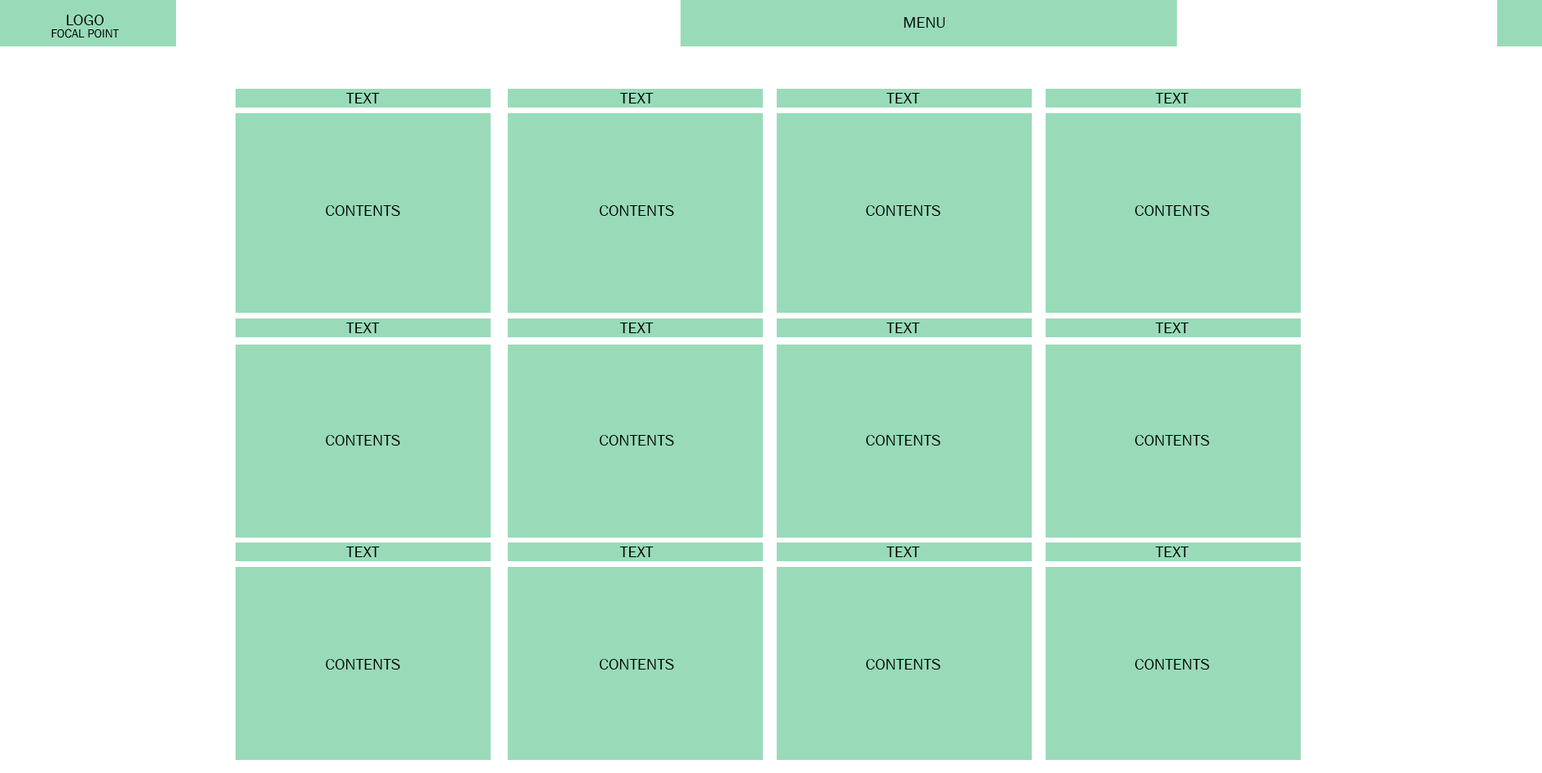
<style>
.page{position:relative;width:1542px;height:773px;background:#99dbb9}
.page>*{position:absolute;margin:0}
.t1{font:12.2px/12.2px "FranklinGothic-Book";color:#000000;text-transform:uppercase}
.t2{font:16.3px/19.6px "FranklinGothic-Book";color:#000000;text-transform:uppercase}
.t3{font:16.3px "FranklinGothic-Book";color:#000000;text-transform:uppercase}
</style>
<div class="page">
<p class="t1" style="left:51px;top:15px;width:68px;height:23px;text-align:center"><span class="t2">LOGO<br></span>Focal Point</p>
<p class="t3" style="left:904px;top:17px;width:41px;height:11px">Menu</p>
<p class="t3" style="left:346px;top:93px;width:34px;height:10px">Text</p>
<p class="t3" style="left:619px;top:93px;width:35px;height:10px">Text</p>
<p class="t3" style="left:886px;top:93px;width:34px;height:10px">Text</p>
<p class="t3" style="left:1155px;top:93px;width:34px;height:10px">Text</p>
<p class="t3" style="left:325px;top:205px;width:75px;height:11px">contents</p>
<p class="t3" style="left:599px;top:205px;width:75px;height:11px">contents</p>
<p class="t3" style="left:865px;top:205px;width:75px;height:11px">contents</p>
<p class="t3" style="left:1134px;top:205px;width:75px;height:11px">contents</p>
<p class="t3" style="left:346px;top:323px;width:34px;height:10px">Text</p>
<p class="t3" style="left:619px;top:323px;width:35px;height:10px">Text</p>
<p class="t3" style="left:886px;top:323px;width:34px;height:10px">Text</p>
<p class="t3" style="left:1155px;top:323px;width:34px;height:10px">Text</p>
<p class="t3" style="left:325px;top:435px;width:75px;height:11px">contents</p>
<p class="t3" style="left:599px;top:435px;width:75px;height:11px">contents</p>
<p class="t3" style="left:865px;top:435px;width:75px;height:11px">contents</p>
<p class="t3" style="left:1134px;top:435px;width:75px;height:11px">contents</p>
<p class="t3" style="left:346px;top:547px;width:34px;height:10px">Text</p>
<p class="t3" style="left:619px;top:547px;width:35px;height:10px">Text</p>
<p class="t3" style="left:886px;top:547px;width:34px;height:10px">Text</p>
<p class="t3" style="left:1155px;top:547px;width:34px;height:10px">Text</p>
<p class="t3" style="left:325px;top:659px;width:75px;height:11px">contents</p>
<p class="t3" style="left:599px;top:659px;width:75px;height:11px">contents</p>
<p class="t3" style="left:865px;top:659px;width:75px;height:11px">contents</p>
<p class="t3" style="left:1134px;top:659px;width:75px;height:11px">contents</p>
</div>
